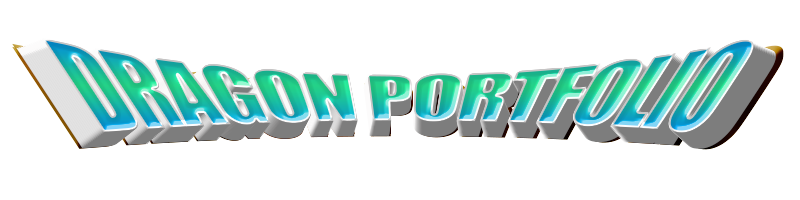
<style>
.page{position:relative;width:800px;height:200px;background:#ffffff}
.page>*{position:absolute;margin:0}
.t1{font:122.4px "Impact";letter-spacing:-0.04em;scale:0.77 1}
.t2{font:121.8px "Impact";letter-spacing:-0.04em;scale:0.77 1}
.t3{font:121.2px "Impact";letter-spacing:-0.04em;scale:0.77 1}
.t4{font:120.6px "Impact";letter-spacing:-0.04em;scale:0.77 1}
.t5{font:120px "Impact";letter-spacing:-0.04em;scale:0.77 1}
.t6{font:130px "Impact";letter-spacing:-0.04em;scale:0.77 1}
.t7{font:129.3px "Impact";letter-spacing:-0.04em;scale:0.77 1}
.t8{font:128.1px "Impact";letter-spacing:-0.04em;scale:0.77 1}
.t9{font:127.4px "Impact";letter-spacing:-0.04em;scale:0.77 1}
.t10{font:126.8px "Impact";letter-spacing:-0.04em;scale:0.77 1}
.t11{font:126.1px "Impact";letter-spacing:-0.04em;scale:0.77 1}
.t12{font:125.5px "Impact";letter-spacing:-0.04em;scale:0.77 1}
.t13{font:124.9px "Impact";letter-spacing:-0.04em;scale:0.77 1}
.t14{font:124.3px "Impact";letter-spacing:-0.04em;scale:0.77 1}
.t15{font:123.6px "Impact";letter-spacing:-0.04em;scale:0.77 1}
.t16{font:123px "Impact";letter-spacing:-0.04em;scale:0.77 1}
</style>
<div class="page">
<p class="t1" style="left:34px;top:41px;width:727px;height:98px">DRAGON PORTFOLIO</p>
<p class="t2" style="left:36px;top:41px;width:723px;height:96px">DRAGON PORTFOLIO</p>
<p class="t3" style="left:38px;top:40px;width:719px;height:96px">DRAGON PORTFOLIO</p>
<p class="t4" style="left:40px;top:39px;width:716px;height:96px">DRAGON PORTFOLIO</p>
<p class="t5" style="left:41px;top:38px;width:713px;height:96px">DRAGON PORTFOLIO</p>
<p class="t5" style="left:41px;top:37px;width:713px;height:96px">DRAGON PORTFOLIO</p>
<p class="t6" style="left:12px;top:46px;width:772px;height:104px">DRAGON PORTFOLIO</p>
<p class="t6" style="left:12px;top:43px;width:772px;height:104px">DRAGON PORTFOLIO</p>
<p class="t7" style="left:14px;top:45px;width:768px;height:103px">DRAGON PORTFOLIO</p>
<p class="t8" style="left:16px;top:47px;width:760px;height:102px">DRAGON PORTFOLIO</p>
<p class="t9" style="left:18px;top:47px;width:757px;height:101px">DRAGON PORTFOLIO</p>
<p class="t10" style="left:20px;top:46px;width:753px;height:101px">DRAGON PORTFOLIO</p>
<p class="t11" style="left:22px;top:45px;width:749px;height:101px">DRAGON PORTFOLIO</p>
<p class="t12" style="left:24px;top:45px;width:745px;height:99px">DRAGON PORTFOLIO</p>
<p class="t13" style="left:26px;top:44px;width:742px;height:99px">DRAGON PORTFOLIO</p>
<p class="t14" style="left:28px;top:43px;width:738px;height:99px">DRAGON PORTFOLIO</p>
<p class="t15" style="left:30px;top:43px;width:734px;height:98px">DRAGON PORTFOLIO</p>
<p class="t16" style="left:32px;top:42px;width:730px;height:98px">DRAGON PORTFOLIO</p>
</div>
